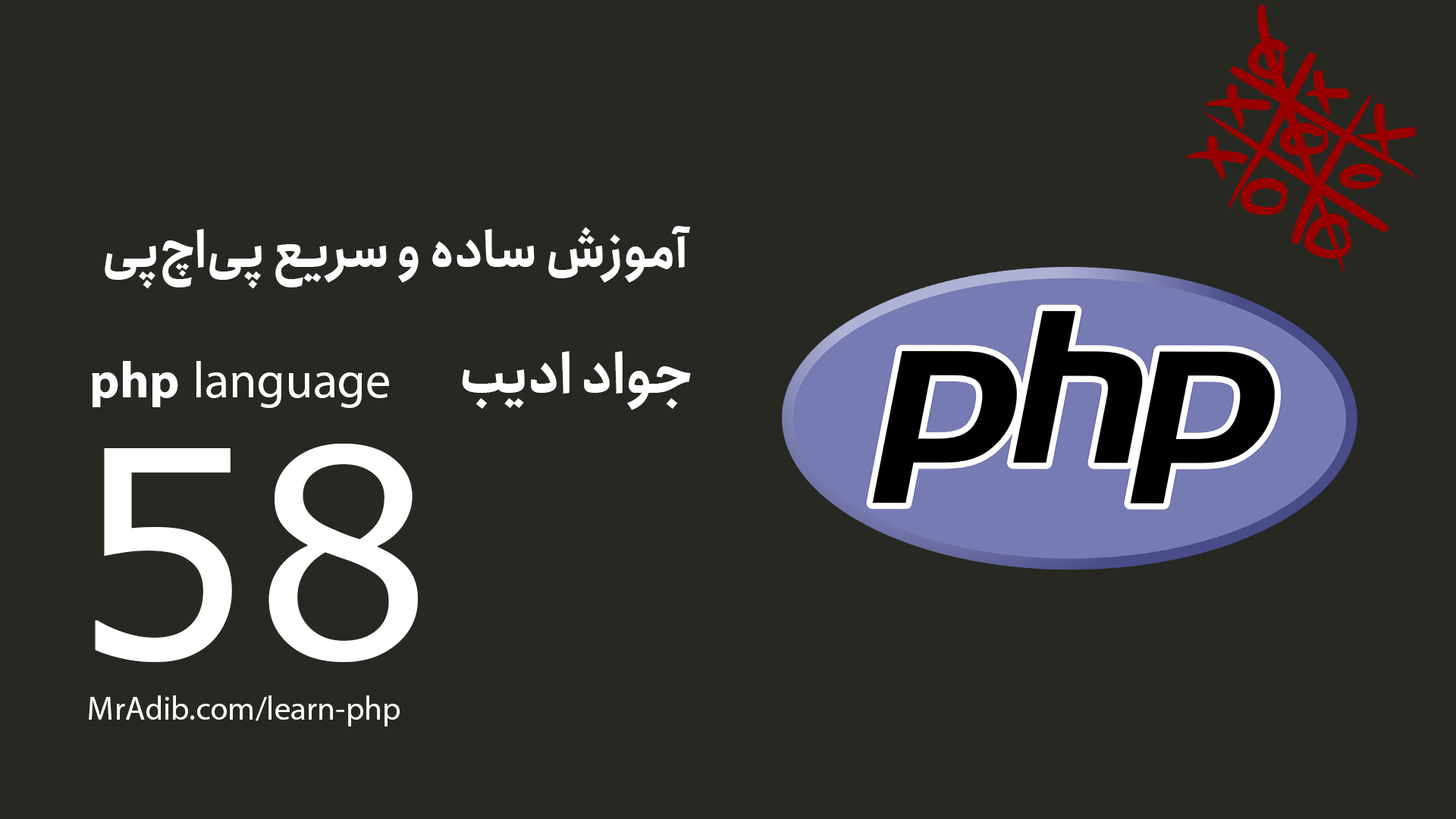
<style>
.page{position:relative;width:1456px;height:819px;background:#272822}
.page>*{position:absolute;margin:0}
.t1{font:49.7px "Anjoman-Bold";color:#ffffff}
.t2{font:54.6px "Anjoman-Bold";color:#ffffff}
.t3{font:70.7px "MyriadArabic-Regular";color:#ffffff}
.t4{font:70.7px "MyriadArabic-Bold";color:#ffffff}
.t5{font:288.2px "Verdana";color:#ffffff}
.t6{font:45.9px "MyriadArabic-Regular";color:#ffffff}
</style>
<div class="page">
<p class="t1" style="left:105px;top:226px;width:586px;height:63px">آموزش ساده و سریع پی‌اچ‌پی</p>
<p class="t2" style="left:462px;top:351px;width:229px;height:59px">جواد ادیب</p>
<p class="t3" style="left:92px;top:361px;width:297px;height:47px"><span class="t4">php</span> language</p>
<p class="t5" style="left:95px;top:444px;width:323px;height:218px">58</p>
<p class="t6" style="left:89px;top:695px;width:311px;height:31px">MrAdib.com/learn-php</p>
</div>
